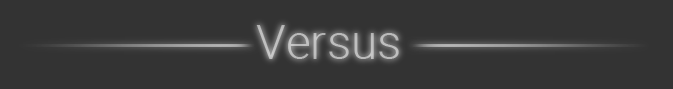
<style>
.page{position:relative;width:673px;height:89px;background:#333333}
.page>*{position:absolute;margin:0}
.t1{font:48px "Roboto-Light";color:#bfbfbf}
</style>
<div class="page">
<p class="t1" style="left:256px;top:25px;width:143px;height:34px">Versus</p>
</div>
